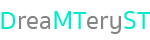
<style>
.page{position:relative;width:150px;height:40px;background:#ffffff}
.page>*{position:absolute;margin:0}
.t1{font:26.1px "SukhumvitSet-Medium";color:#848484}
.t2{font:26.1px "SukhumvitSet-Medium";color:#00eacc}
.t3{font:26.1px "SukhumvitSet-Medium";color:#00ebcd}
</style>
<div class="page">
<p class="t1" style="left:1px;top:11px;width:150px;height:23px"><span class="t2">D</span>rea<span class="t3">MT</span>ery<span class="t3">ST</span></p>
</div>
